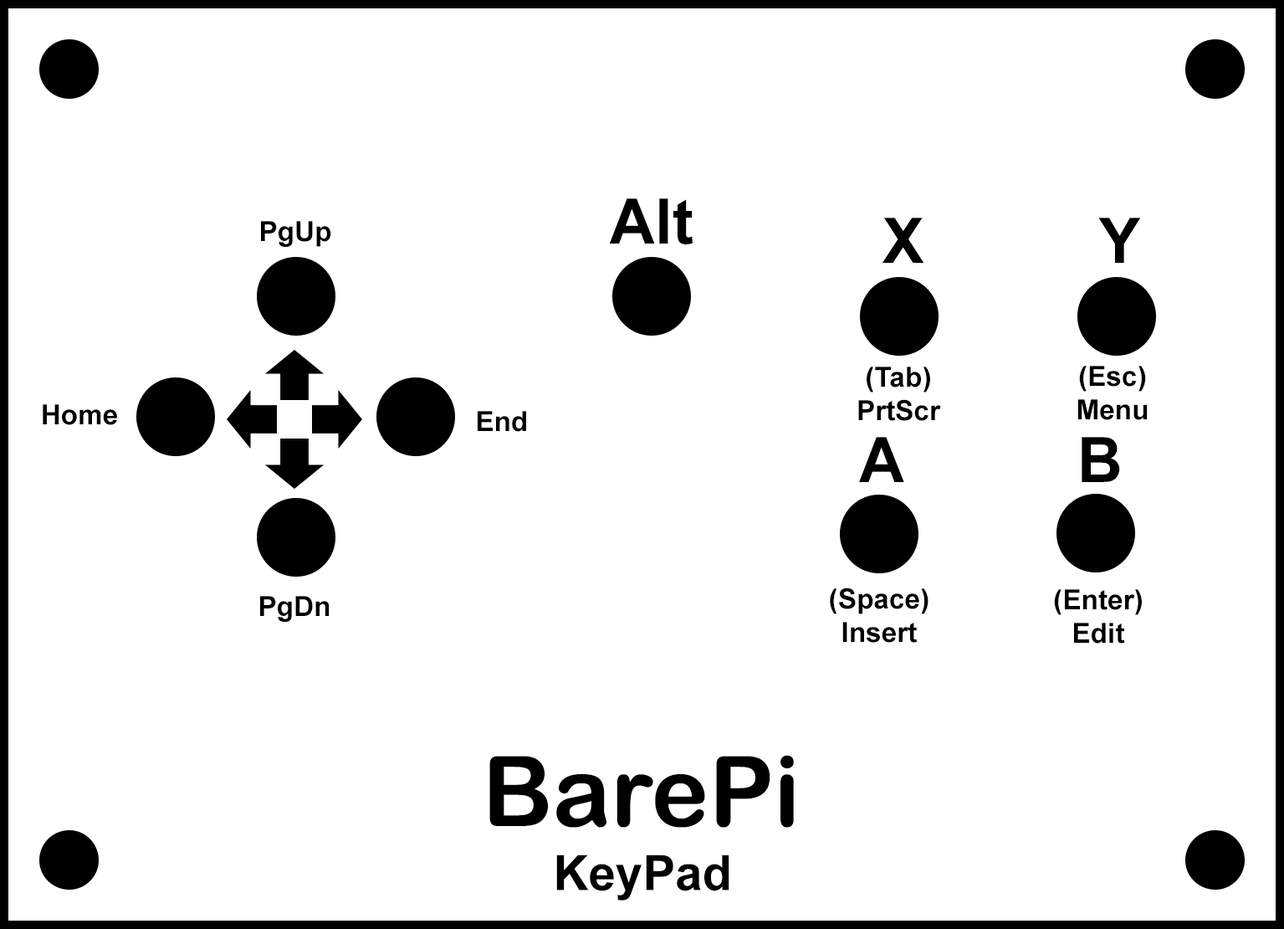
<style>
.page{position:relative;width:1284px;height:929px;background:#ffffff}
.page>*{position:absolute;margin:0}
.t1{font:62.7px "Arial-BoldMT";color:#000000}
.t2{font:27.9px "Arial-BoldMT";color:#000000}
.t3{font:97.6px "ArialRoundedMTBold";color:#000000}
.t4{font:48.8px "Arial-BoldMT";color:#000000}
</style>
<div class="page">
<p class="t1" style="left:609px;top:198px;width:84px;height:46px">Alt</p>
<p class="t2" style="left:261px;top:221px;width:70px;height:26px">PgUp</p>
<p class="t1" style="left:883px;top:218px;width:41px;height:45px">X</p>
<p class="t1" style="left:1098px;top:218px;width:43px;height:45px">Y</p>
<p class="t2" style="left:1077px;top:366px;width:71px;height:54px;text-align:center">(Esc)<br>Menu</p>
<p class="t2" style="left:858px;top:366px;width:83px;height:55px;text-align:center">(Tab)<br>PrtScr</p>
<p class="t2" style="left:43px;top:404px;width:74px;height:21px">Home</p>
<p class="t2" style="left:478px;top:411px;width:48px;height:21px">End</p>
<p class="t1" style="left:859px;top:437px;width:45px;height:45px">A</p>
<p class="t1" style="left:1082px;top:437px;width:38px;height:45px">B</p>
<p class="t2" style="left:830px;top:587px;width:99px;height:55px;text-align:center">(Space)<br>Insert</p>
<p class="t2" style="left:1054px;top:589px;width:88px;height:54px;text-align:center">(Enter)<br>Edit</p>
<p class="t2" style="left:260px;top:596px;width:70px;height:26px">PgDn</p>
<p class="t3" style="left:489px;top:755px;width:305px;height:72px">BarePi</p>
<p class="t4" style="left:556px;top:854px;width:173px;height:46px">KeyPad</p>
</div>
